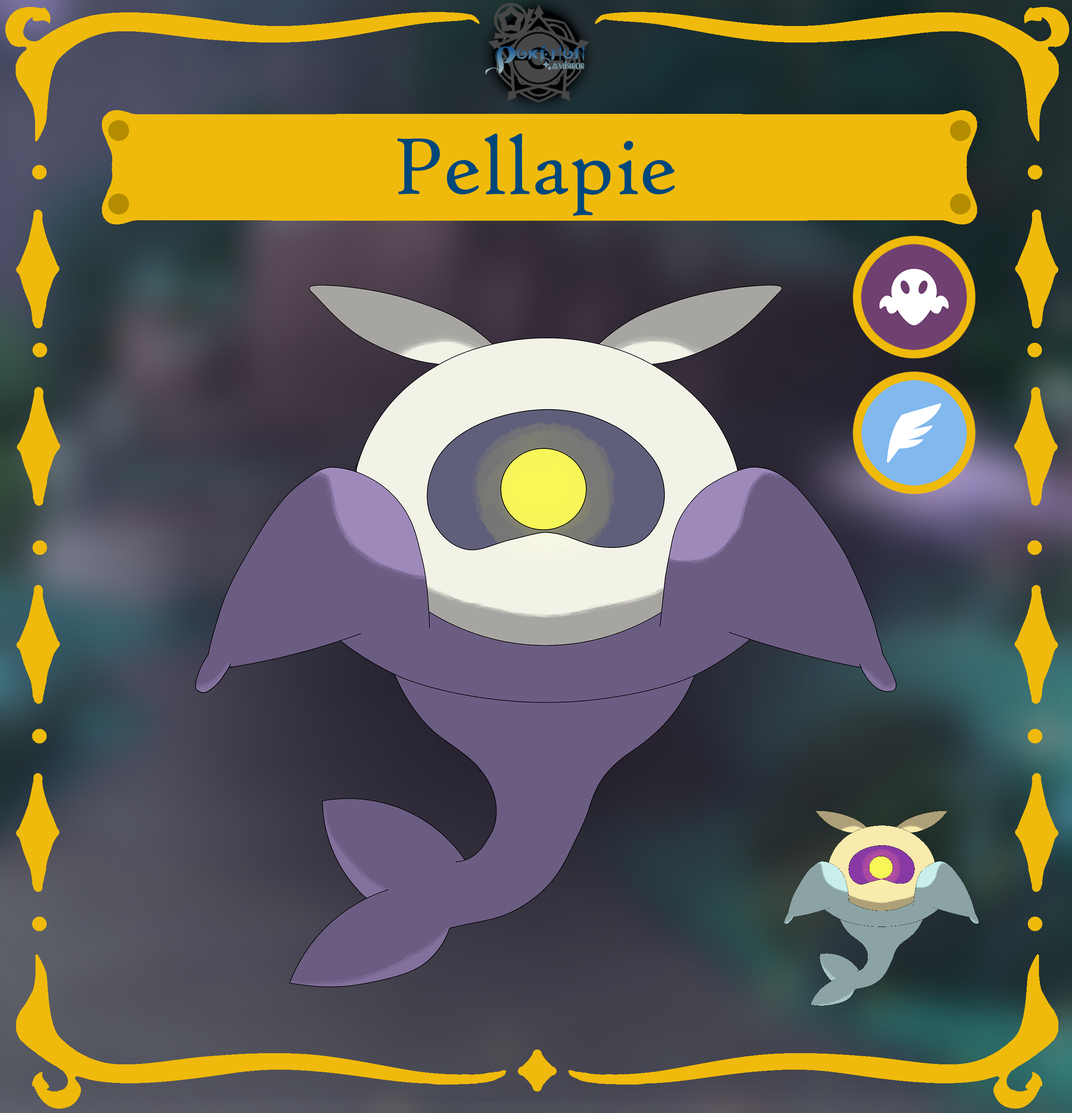
<style>
.page{position:relative;width:1072px;height:1113px}
.page>*{position:absolute;margin:0}
.t1{font:86.6px "HighTowerText-Reg";color:#004879}
</style>
<div class="page">
<p class="t1" style="left:397px;top:133px;width:278px;height:83px">Pellapie</p>
</div>
